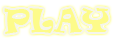
<style>
.page{position:relative;width:113px;height:41px;background:#ffffff}
.page>*{position:absolute;margin:0}
.t1{font:30px "Ravie";color:#fdfb8a}
</style>
<div class="page">
<p class="t1" style="left:4px;top:8px;width:105px;height:26px">PLAY</p>
</div>
